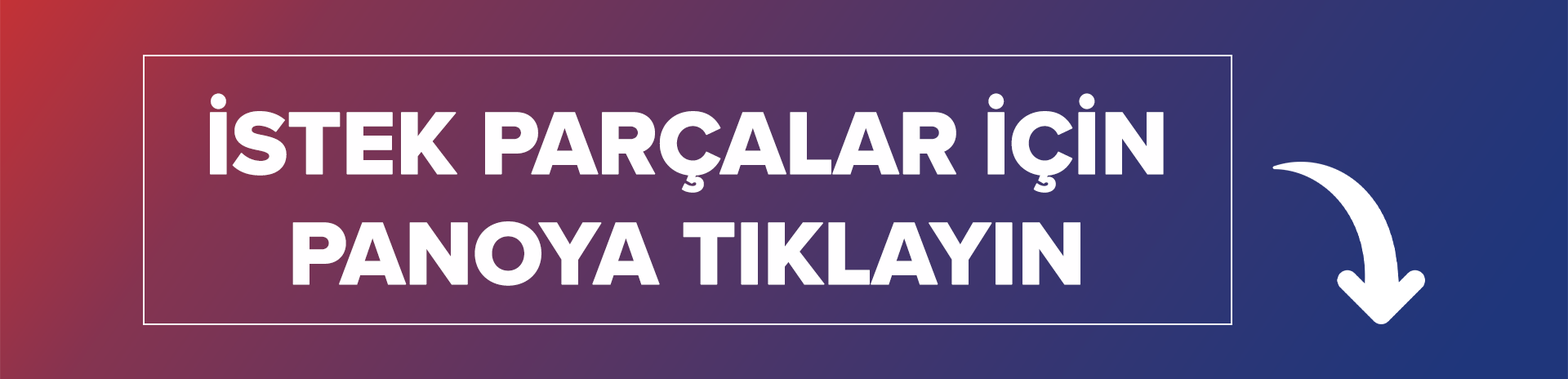
<style>
.page{position:relative;width:1568px;height:379px}
.page>*{position:absolute;margin:0}
.t1{font:91.9px "ProximaNova-Extrabld";letter-spacing:-0.025em;color:#fffeff;font-weight:bold}
</style>
<div class="page">
<p class="t1" style="left:210px;top:93px;width:954px;height:193px;text-align:center">İSTEK PARÇALAR İÇİN<br>PANOYA TIKLAYIN</p>
</div>
